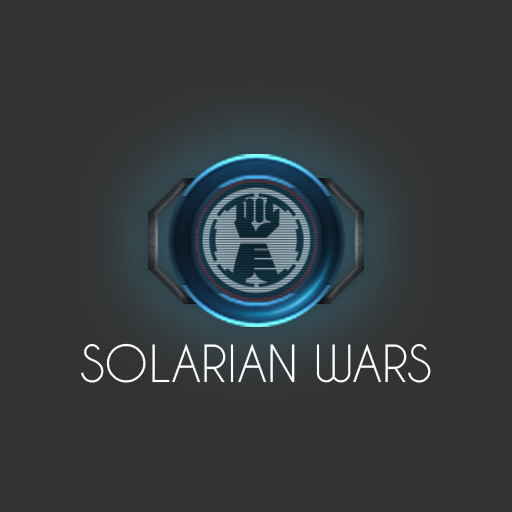
<style>
.page{position:relative;width:512px;height:512px;background:#333333}
.page>*{position:absolute;margin:0}
.t1{font:48px "CaviarDreams";color:#ffffff}
</style>
<div class="page">
<p class="t1" style="left:81px;top:343px;width:350px;height:40px">SOLARIAN WARS</p>
</div>
